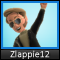
<style>
.page{position:relative;width:60px;height:60px}
.page>*{position:absolute;margin:0}
.t1{font:10px "Calibri";color:#ffffff}
</style>
<div class="page">
<p class="t1" style="left:10px;top:50px;width:40px;height:9px">Zlappie12</p>
</div>
